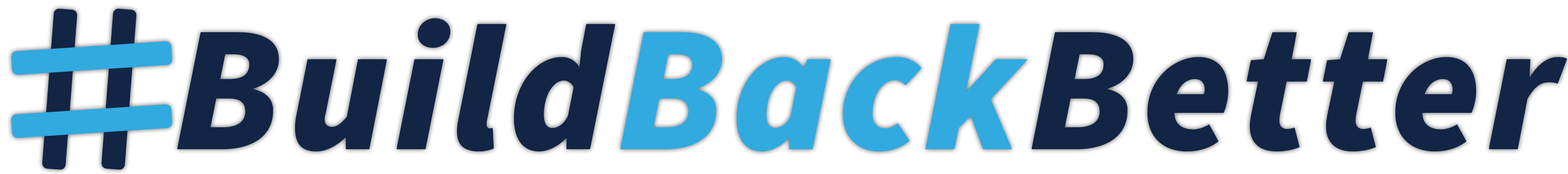
<style>
.page{position:relative;width:1568px;height:174px;background:#ffffff}
.page>*{position:absolute;margin:0}
.t1{font:180.1px "SourceSansPro-BlackIt";letter-spacing:0.05em;color:#122545}
.t2{font:180.1px "SourceSansPro-BlackIt";letter-spacing:0.05em;color:#31aae0}
</style>
<div class="page">
<p class="t1" style="left:177px;top:18px;width:1390px;height:134px">Build<span class="t2">Back</span>Better</p>
</div>
